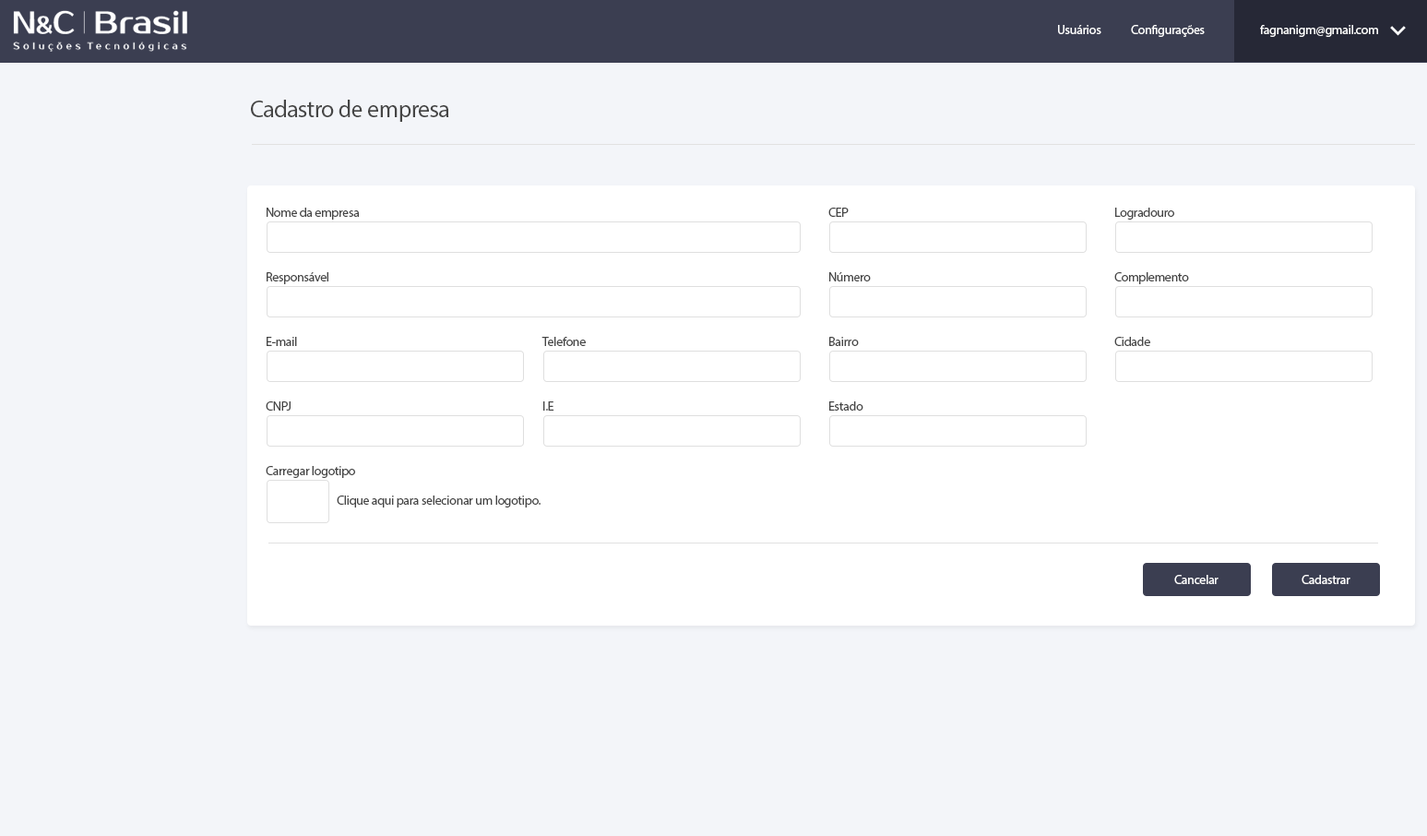
<style>
.page{position:relative;width:1427px;height:836px;background:#f3f5f9}
.page>*{position:absolute;margin:0}
.t1{font:12.9px "MyriadPro-Regular";letter-spacing:-0.025em;color:#ffffff}
.t2{font:24px "MyriadPro-Regular";letter-spacing:-0.025em;color:#454545}
.t3{font:12.9px "MyriadPro-Regular";letter-spacing:-0.025em;color:#454545}
</style>
<div class="page">
<p class="t1" style="left:1058px;top:25px;width:43px;height:9px">Usuários</p>
<p class="t1" style="left:1131px;top:25px;width:74px;height:12px">Configurações</p>
<p class="t1" style="left:1260px;top:25px;width:118px;height:12px">fagnanigm@gmail.com</p>
<p class="t2" style="left:251px;top:100px;width:198px;height:22px">Cadastro de empresa</p>
<p class="t3" style="left:267px;top:208px;width:93px;height:12px">Nome da empresa</p>
<p class="t3" style="left:828px;top:208px;width:21px;height:9px">CEP</p>
<p class="t3" style="left:1115px;top:208px;width:59px;height:12px">Logradouro</p>
<p class="t3" style="left:267px;top:272px;width:61px;height:12px">Responsável</p>
<p class="t3" style="left:829px;top:272px;width:42px;height:9px">Número</p>
<p class="t3" style="left:1114px;top:272px;width:75px;height:12px">Complemento</p>
<p class="t3" style="left:267px;top:337px;width:30px;height:9px">E-mail</p>
<p class="t3" style="left:541px;top:337px;width:45px;height:9px">Telefone</p>
<p class="t3" style="left:829px;top:337px;width:30px;height:9px">Bairro</p>
<p class="t3" style="left:1114px;top:337px;width:36px;height:9px">Cidade</p>
<p class="t3" style="left:266px;top:401px;width:25px;height:9px">CNPJ</p>
<p class="t3" style="left:543px;top:401px;width:11px;height:9px">I.E</p>
<p class="t3" style="left:829px;top:401px;width:34px;height:9px">Estado</p>
<p class="t3" style="left:266px;top:466px;width:89px;height:12px">Carregar logotipo</p>
<p class="t3" style="left:337px;top:495px;width:204px;height:12px">Clique aqui para selecionar um logotipo.</p>
<p class="t1" style="left:1174px;top:575px;width:44px;height:9px">Cancelar</p>
<p class="t1" style="left:1301px;top:575px;width:49px;height:9px">Cadastrar</p>
</div>
